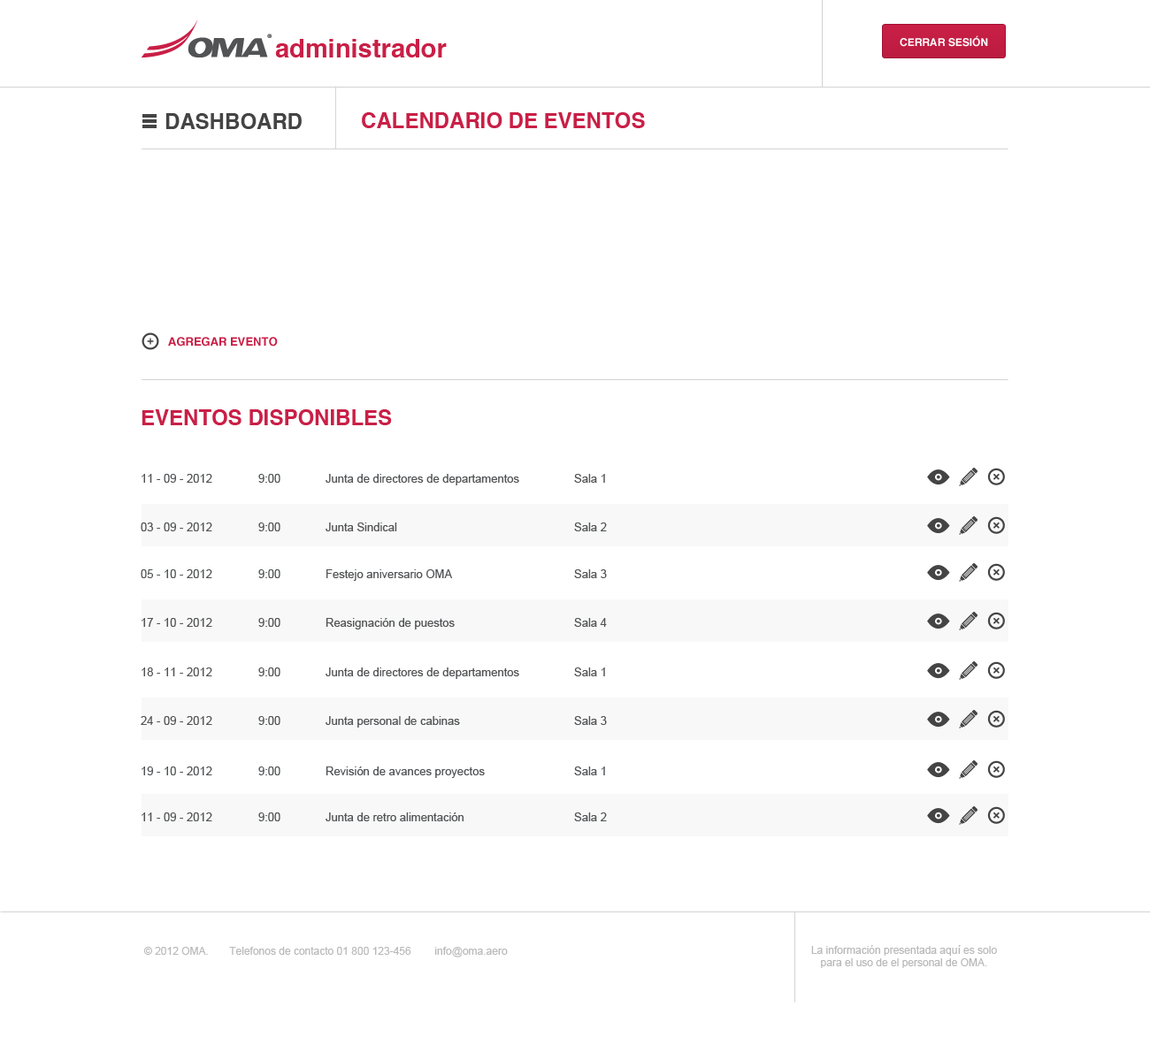
<style>
.page{position:relative;width:1150px;height:1037px;background:#ffffff}
.page>*{position:absolute;margin:0}
.t1{font:25.7px "Helvetica-Bold";color:#c91f46}
.t2{font:10.6px "Helvetica-Bold";color:#ffffff;text-transform:uppercase}
.t3{font:21.2px "Helvetica-Bold";color:#444444;text-transform:uppercase}
.t4{font:21.2px "Helvetica-Bold";color:#c91f46;text-transform:uppercase}
.t5{font:11.5px "Helvetica-Bold";color:#c91f46;text-transform:uppercase}
.t6{font:11.5px "ArialMT";color:#515355}
.t7{font:10.6px "ArialMT";color:#b9b9b9}
</style>
<div class="page">
<p class="t1" style="left:275px;top:39px;width:172px;height:18px">administrador</p>
<p class="t2" style="left:899px;top:35px;width:89px;height:12px">CERRAR sesión</p>
<p class="t3" style="left:165px;top:113px;width:137px;height:16px">DASHBOARD</p>
<p class="t4" style="left:362px;top:112px;width:283px;height:16px">calendario de eventos</p>
<p class="t5" style="left:168px;top:337px;width:110px;height:10px">agregar evento</p>
<p class="t4" style="left:141px;top:409px;width:251px;height:16px">eventos disponibles</p>
<p class="t6" style="left:141px;top:474px;width:71px;height:9px">11 - 09 - 2012</p>
<p class="t6" style="left:258px;top:474px;width:22px;height:9px">9:00</p>
<p class="t6" style="left:325px;top:474px;width:194px;height:11px">Junta de directores de departamentos</p>
<p class="t6" style="left:574px;top:474px;width:31px;height:9px">Sala 1</p>
<p class="t6" style="left:141px;top:523px;width:71px;height:8px">03 - 09 - 2012</p>
<p class="t6" style="left:258px;top:523px;width:22px;height:8px">9:00</p>
<p class="t6" style="left:325px;top:523px;width:72px;height:8px">Junta Sindical</p>
<p class="t6" style="left:574px;top:523px;width:33px;height:8px">Sala 2</p>
<p class="t6" style="left:141px;top:569px;width:71px;height:9px">05 - 10 - 2012</p>
<p class="t6" style="left:258px;top:569px;width:22px;height:9px">9:00</p>
<p class="t6" style="left:326px;top:569px;width:127px;height:12px">Festejo aniversario OMA</p>
<p class="t6" style="left:574px;top:569px;width:33px;height:9px">Sala 3</p>
<p class="t6" style="left:141px;top:618px;width:71px;height:9px">17 - 10 - 2012</p>
<p class="t6" style="left:258px;top:618px;width:22px;height:9px">9:00</p>
<p class="t6" style="left:325px;top:618px;width:130px;height:12px">Reasignación de puestos</p>
<p class="t6" style="left:574px;top:618px;width:33px;height:9px">Sala 4</p>
<p class="t6" style="left:141px;top:668px;width:71px;height:8px">18 - 11 - 2012</p>
<p class="t6" style="left:258px;top:668px;width:22px;height:8px">9:00</p>
<p class="t6" style="left:325px;top:668px;width:194px;height:11px">Junta de directores de departamentos</p>
<p class="t6" style="left:574px;top:668px;width:31px;height:8px">Sala 1</p>
<p class="t6" style="left:141px;top:716px;width:71px;height:9px">24 - 09 - 2012</p>
<p class="t6" style="left:258px;top:716px;width:22px;height:9px">9:00</p>
<p class="t6" style="left:325px;top:716px;width:135px;height:12px">Junta personal de cabinas</p>
<p class="t6" style="left:574px;top:716px;width:33px;height:9px">Sala 3</p>
<p class="t6" style="left:141px;top:767px;width:71px;height:9px">19 - 10 - 2012</p>
<p class="t6" style="left:258px;top:767px;width:22px;height:9px">9:00</p>
<p class="t6" style="left:325px;top:767px;width:160px;height:11px">Revisión de avances proyectos</p>
<p class="t6" style="left:574px;top:767px;width:31px;height:9px">Sala 1</p>
<p class="t6" style="left:141px;top:813px;width:71px;height:9px">11 - 09 - 2012</p>
<p class="t6" style="left:258px;top:813px;width:22px;height:9px">9:00</p>
<p class="t6" style="left:325px;top:813px;width:138px;height:9px">Junta de retro alimentación</p>
<p class="t6" style="left:574px;top:813px;width:33px;height:9px">Sala 2</p>
<p class="t7" style="left:143px;top:947px;width:365px;height:11px">© 2012 OMA.       Telefonos de contacto 01 800 123-456        info@oma.aero</p>
<p class="t7" style="left:811px;top:945px;width:186px;height:23px;text-align:center">La información presentada aquí es solo<br>para el uso de el personal de OMA.</p>
</div>
